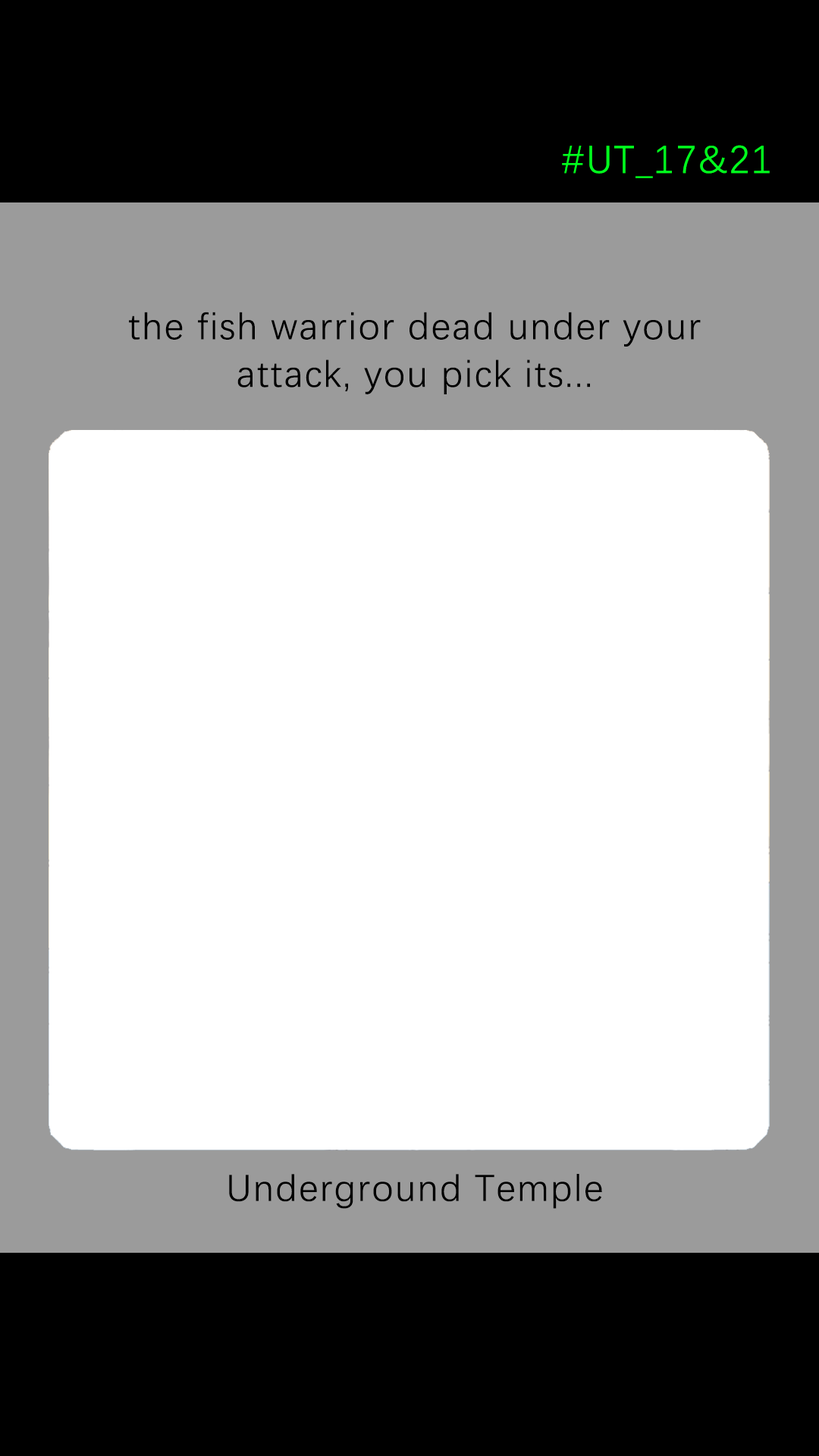
<style>
.page{position:relative;width:819px;height:1456px;background:#ffffff}
.page>*{position:absolute;margin:0}
.t1{font:39.2px "DengXian-Regular";letter-spacing:0.04em;color:#00ff1e}
.t2{font:37.9px/47.6px "DengXian-Regular";letter-spacing:0.04em;color:#000000}
.t3{font:37.9px "DengXian-Regular";letter-spacing:0.04em;color:#000000}
</style>
<div class="page">
<p class="t1" style="left:562px;top:145px;width:208px;height:33px">#UT_17&amp;21</p>
<p class="t2" style="left:129px;top:312px;width:572px;height:82px;text-align:center">the fish warrior dead under your<br>attack, you pick its...</p>
<p class="t3" style="left:229px;top:1174px;width:373px;height:35px">Underground Temple</p>
</div>
